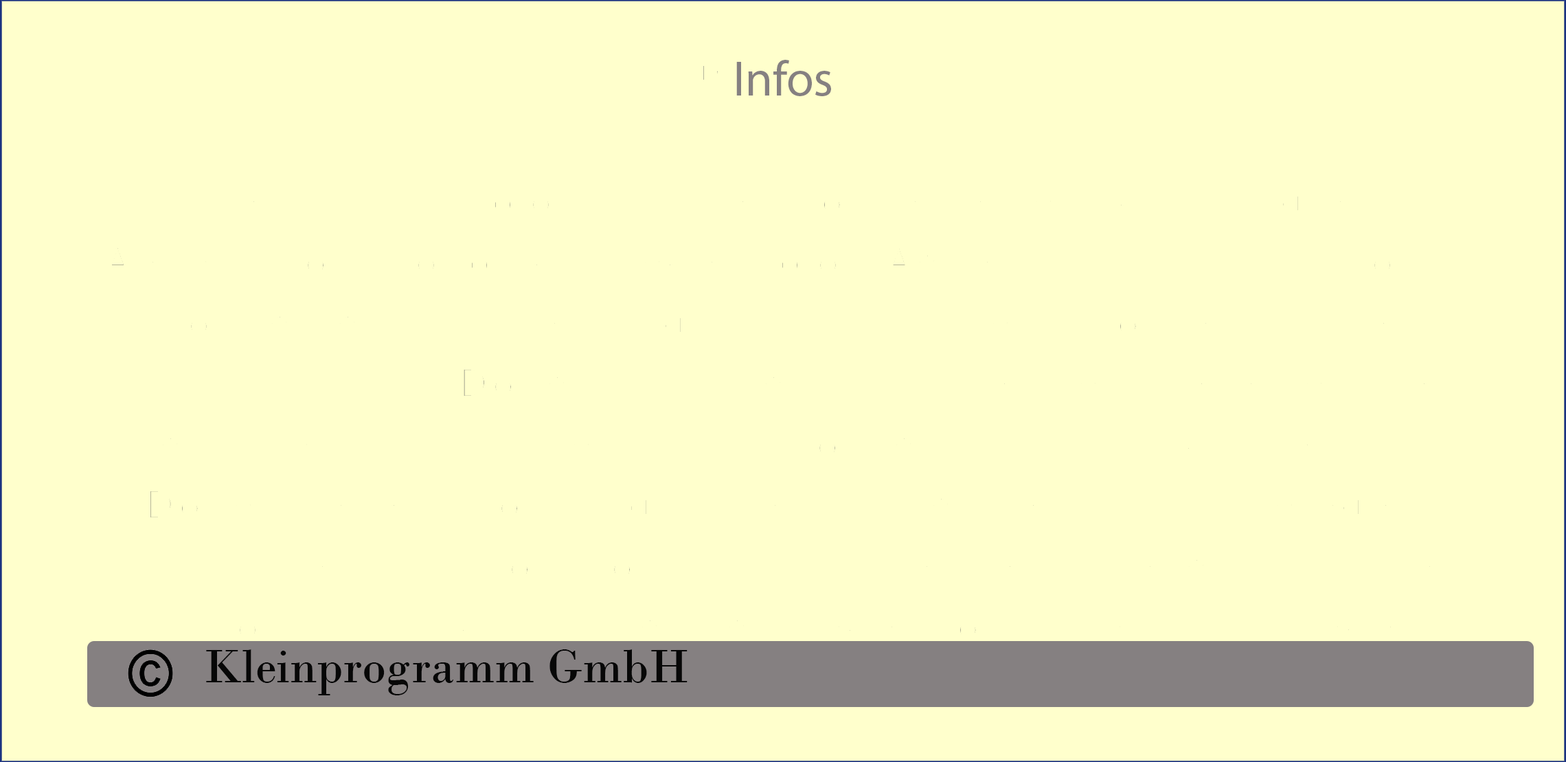
<style>
.page{position:relative;width:1566px;height:762px;background:#ffffcc}
.page>*{position:absolute;margin:0}
.t1{font:49.4px "MyriadPro-Regular";color:#858081}
.t2{font:49.4px "BodoniMT";color:#070707}
</style>
<div class="page">
<p class="t1" style="left:736px;top:60px;width:95px;height:36px">Infos</p>
<p class="t2" style="left:206px;top:649px;width:481px;height:46px">Kleinprogramm GmbH</p>
</div>
